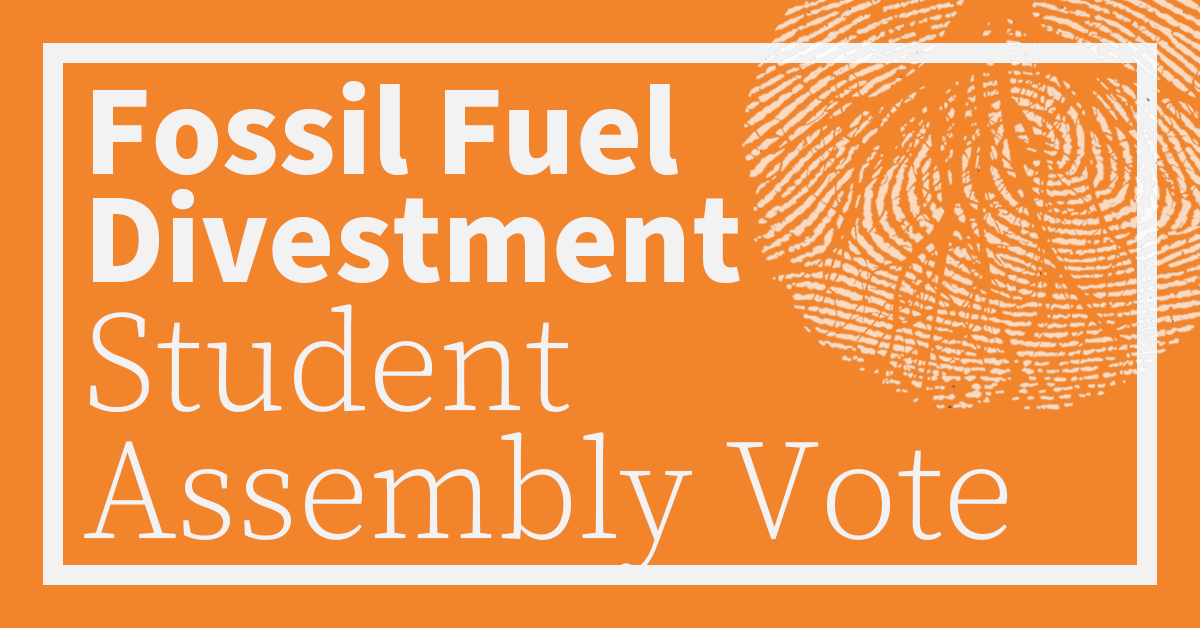
<style>
.page{position:relative;width:1200px;height:628px;background:#f2842c}
.page>*{position:absolute;margin:0}
.t1{font:128px/108px "SourceSansPro-Bold";color:#f2f2f2}
.t2{font:142px/128px "SourceSerifPro-Light";color:#f2f2f2}
</style>
<div class="page">
<p class="t1" style="left:84px;top:81px;width:924px;height:493px">Fossil Fuel <br>Divestment<br><span class="t2">Student <br>Assembly Vote</span></p>
</div>
